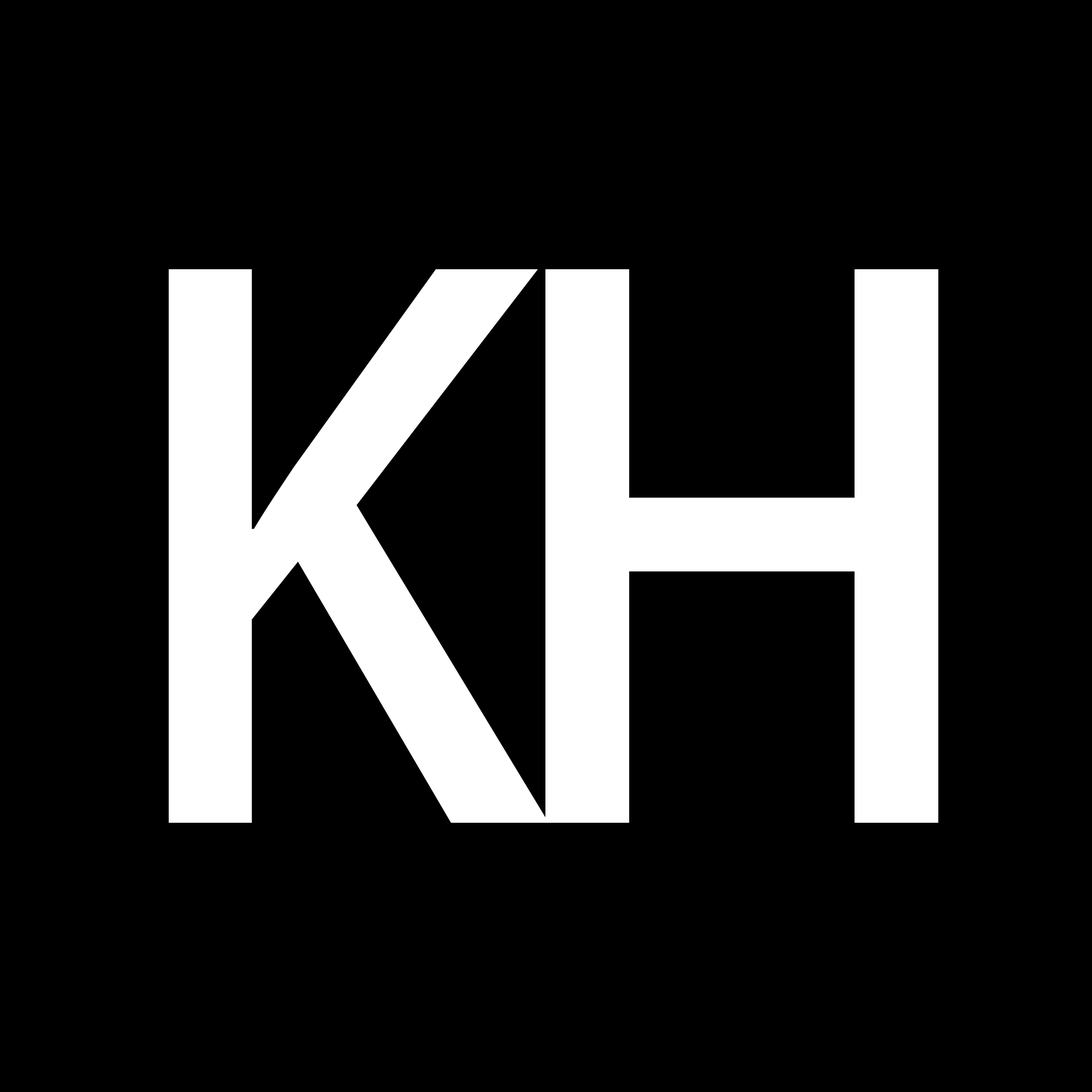
<style>
.page{position:relative;width:1092px;height:1092px;background:#000000}
.page>*{position:absolute;margin:0}
.t1{font:722.2px "AdobeHeitiStd-Regular";color:#ffffff}
</style>
<div class="page">
<p class="t1" style="left:169px;top:269px;width:380px;height:554px">K</p>
<p class="t1" style="left:545px;top:269px;width:393px;height:554px">H</p>
</div>
